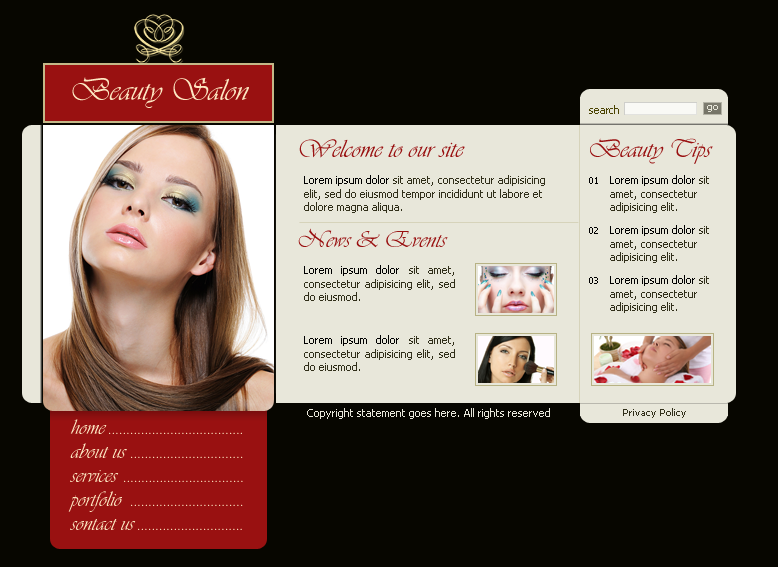
<style>
.page{position:relative;width:778px;height:567px;background:#070600}
.page>*{position:absolute;margin:0}
.t1{font:32px "Vivaldii";color:#fde7c2}
.t2{font:11px "Tahoma";color:#4b4402}
.t3{font:10px "Tahoma";color:#e8e7da}
.t4{font:26px "VivaldiD";color:#991111}
.t5{font:26px "Vivaldii";color:#991111}
.t6{font:11px "Tahoma";color:#312f1a}
.t7{font:11px "Tahoma";color:#000000}
.t8{font:10px "Tahoma";color:#000000}
.t9{font:24px "Vivaldii";color:#991111}
.t10{font:11px "Tahoma";color:#e8e7da}
.t11{font:10px "Tahoma";color:#312f1a}
.t12{font:22px/24px "Vivaldii";color:#fde7c2}
</style>
<div class="page">
<p class="t1" style="left:72px;top:77px;width:177px;height:31px">Beauty Salon</p>
<p class="t2" style="left:589px;top:105px;width:30px;height:9px">search</p>
<p class="t3" style="left:707px;top:105px;width:11px;height:7px">go</p>
<p class="t4" style="left:299px;top:139px;width:166px;height:19px">Welcome to our site</p>
<p class="t5" style="left:590px;top:138px;width:123px;height:26px">Beauty Tips</p>
<p class="t6" style="left:304px;top:175px;width:241px;height:38px"><span class="t7">Lorem ipsum dolor</span> sit amet, consectetur adipisicing elit, sed do eiusmod tempor incididunt ut labore et dolore magna aliqua.</p>
<p class="t8" style="left:589px;top:177px;width:9px;height:7px">01</p>
<p class="t6" style="left:610px;top:175px;width:99px;height:38px"><span class="t7">Lorem ipsum dolor</span> sit amet, consectetur adipisicing elit.</p>
<p class="t9" style="left:298px;top:228px;width:150px;height:20px">News &amp; Events</p>
<p class="t8" style="left:589px;top:227px;width:9px;height:7px">02</p>
<p class="t6" style="left:610px;top:225px;width:99px;height:38px"><span class="t7">Lorem ipsum dolor</span> sit amet, consectetur adipisicing elit.</p>
<p class="t6" style="left:304px;top:265px;width:151px;height:36px;text-align:justify"><span class="t7">Lorem ipsum dolor</span> sit amet, consectetur adipisicing elit, sed do eiusmod.</p>
<p class="t8" style="left:589px;top:277px;width:9px;height:7px">03</p>
<p class="t6" style="left:610px;top:275px;width:99px;height:38px"><span class="t7">Lorem ipsum dolor</span> sit amet, consectetur adipisicing elit.</p>
<p class="t6" style="left:304px;top:335px;width:151px;height:36px;text-align:justify"><span class="t7">Lorem ipsum dolor</span> sit amet, consectetur adipisicing elit, sed do eiusmod.</p>
<p class="t10" style="left:307px;top:408px;width:243px;height:11px">Copyright statement goes here. All rights reserved</p>
<p class="t11" style="left:623px;top:408px;width:63px;height:10px">Privacy Policy</p>
<p class="t12" style="left:68px;top:419px;width:68px;height:111px">home<br>about us<br>services<br>portfolio<br>sontact us</p>
</div>
